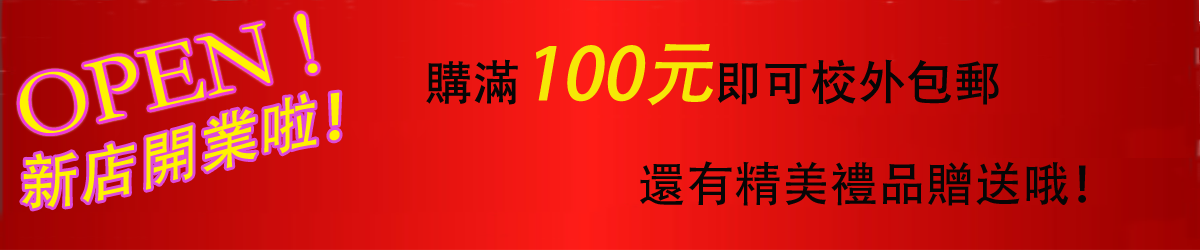
<style>
.page{position:relative;width:1200px;height:250px}
.page>*{position:absolute;margin:0}
.t1{font:92.6px "STKaiti";color:#fff200}
.t2{font:48px "AdobeHeitiStd-Regular";color:#060606}
.t3{font:72px "AdobeHeitiStd-Regular";color:#f6e806;font-style:italic}
.t4{font:60px "AdobeHeitiStd-Regular";color:#fff200}
</style>
<div class="page">
<p class="t1" style="left:19px;top:13px;width:299px;height:120px;rotate:-13deg">OPEN !</p>
<p class="t2" style="left:426px;top:43px;width:573px;height:63px">購滿<span class="t3">100元</span>即可校外包郵</p>
<p class="t4" style="left:22px;top:92px;width:318px;height:117px">新店開業啦！</p>
<p class="t2" style="left:640px;top:161px;width:446px;height:45px">還有精美禮品贈送哦！</p>
</div>
